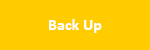
<style>
.page{position:relative;width:150px;height:50px;background:#ffcc00}
.page>*{position:absolute;margin:0}
.t1{font:16px "Calibri-Bold";color:#ffffff}
</style>
<div class="page">
<p class="t1" style="left:49px;top:19px;width:53px;height:14px">Back Up</p>
</div>
